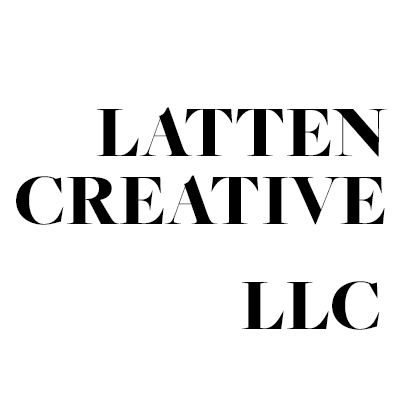
<style>
.page{position:relative;width:400px;height:400px;background:#ffffff}
.page>*{position:absolute;margin:0}
.t1{font:75px "FreightBigProBlack-Regular";color:#000000}
</style>
<div class="page">
<p class="t1" style="left:96px;top:107px;width:291px;height:50px">LATTEN</p>
<p class="t1" style="left:16px;top:175px;width:369px;height:50px">CREATIVE</p>
<p class="t1" style="left:241px;top:281px;width:139px;height:49px">LLC</p>
</div>
